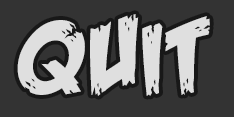
<style>
.page{position:relative;width:234px;height:117px;background:#333333}
.page>*{position:absolute;margin:0}
.t1{font:100px "FeastofFleshBB";color:#dfdfdf}
</style>
<div class="page">
<p class="t1" style="left:17px;top:14px;width:193px;height:82px">qUIT</p>
</div>
